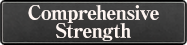
<style>
.page{position:relative;width:187px;height:45px}
.page>*{position:absolute;margin:0}
.t1{font:20px/18px "RyuminPro-Heavy";letter-spacing:-0.04em;color:#fff6f2}
</style>
<div class="page">
<p class="t1" style="left:28px;top:5px;width:131px;height:36px;text-align:center">Comprehensive<br>Strength</p>
</div>
